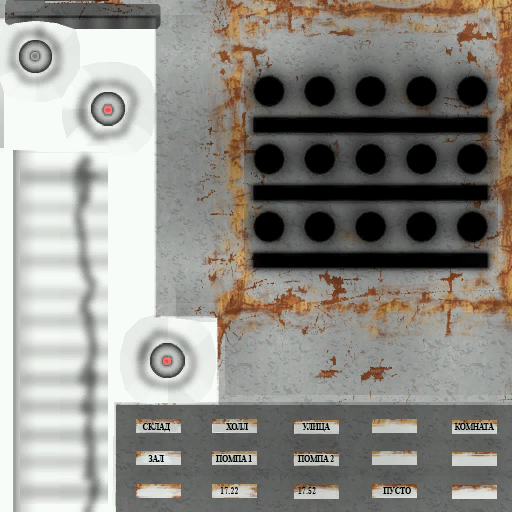
<style>
.page{position:relative;width:512px;height:512px}
.page>*{position:absolute;margin:0}
.t1{font:9px "TimesNewRomanPS-BoldMT";color:#000400;scale:0.84 1}
</style>
<div class="page">
<p class="t1" style="left:142px;top:423px;width:28px;height:9px">СКЛАД</p>
<p class="t1" style="left:226px;top:423px;width:23px;height:7px">ХОЛЛ</p>
<p class="t1" style="left:302px;top:423px;width:29px;height:9px">УЛИЦА</p>
<p class="t1" style="left:454px;top:423px;width:41px;height:7px">КОМНАТА</p>
<p class="t1" style="left:148px;top:455px;width:16px;height:7px">ЗАЛ</p>
<p class="t1" style="left:216px;top:455px;width:36px;height:7px">ПОМПА 1</p>
<p class="t1" style="left:298px;top:455px;width:36px;height:7px">ПОМПА 2</p>
<p class="t1" style="left:383px;top:487px;width:28px;height:7px">ПУСТО</p>
</div>
